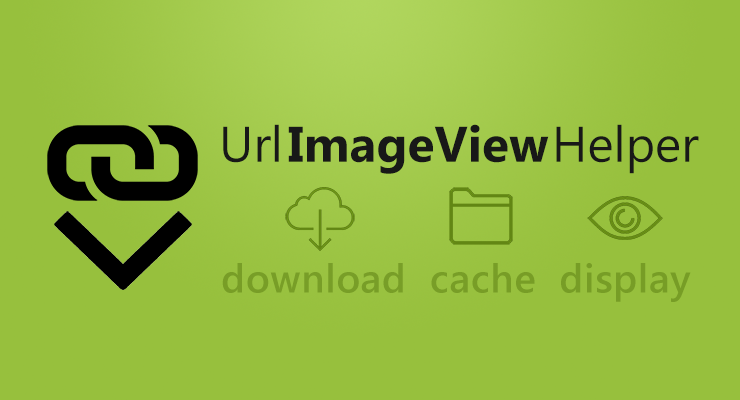
<style>
.page{position:relative;width:740px;height:400px;background:#97c03d}
.page>*{position:absolute;margin:0}
.t1{font:50px "SegoeUI-Bold";color:#181818}
.t2{font:50px "SegoeUI";color:#181818}
.t3{font:50px "SegoeUI";letter-spacing:0.1em;color:#181818}
.t4{font:50px "SegoeUI-Bold";letter-spacing:0.001em;color:#181818}
.t5{font:50px "SegoeUI-Bold";letter-spacing:0.1em;color:#181818}
.t6{font:40px "SegoeUI-Semibold";letter-spacing:0.016em;color:#628614}
</style>
<div class="page">
<p class="t1" style="left:223px;top:124px;width:476px;height:50px"><span class="t2">Ur</span><span class="t3">l</span><span class="t4">I</span>mageVie<span class="t5">w</span><span class="t2">Helper</span></p>
<p class="t6" style="left:222px;top:263px;width:469px;height:39px;opacity:0.63">download  cache  display</p>
</div>
